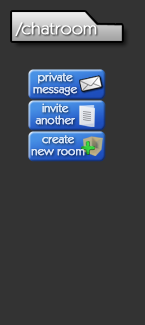
<style>
.page{position:relative;width:145px;height:325px;background:#333333}
.page>*{position:absolute;margin:0}
.t1{font:16.9px "KabelITCbyBT-Book";color:#ffffff;font-weight:bold;scale:1.09 1}
.t2{font:12px/12px "KabelITCbyBT-Book";color:#d6e2f6;font-weight:bold}
.t3{font:12px/12px "KabelITCbyBT-Book";color:#d5e1f5;font-weight:bold}
</style>
<div class="page">
<p class="t1" style="left:15px;top:22px;width:82px;height:14px">/chatroom</p>
<p class="t2" style="left:33px;top:72px;width:44px;height:24px;text-align:center">private<br>message</p>
<p class="t3" style="left:35px;top:103px;width:40px;height:22px;text-align:center">invite<br>another</p>
<p class="t2" style="left:31px;top:135px;width:54px;height:21px;text-align:center">create<br>new room</p>
</div>
